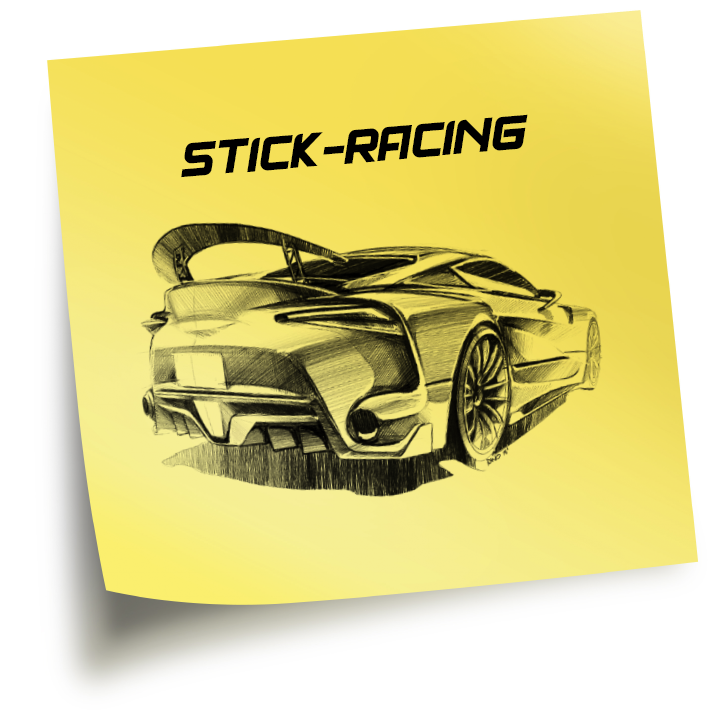
<style>
.page{position:relative;width:714px;height:714px;background:#ffffff}
.page>*{position:absolute;margin:0}
.t1{font:50.4px "Spantaran";color:#000000;text-transform:uppercase}
</style>
<div class="page">
<p class="t1" style="left:181px;top:114px;width:347px;height:64px;rotate:-5deg">STICK-RACING</p>
</div>
